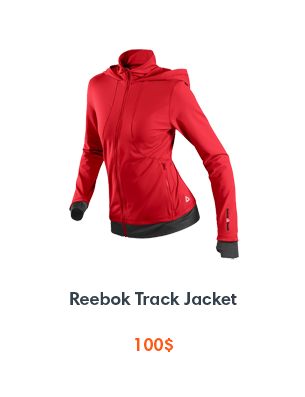
<style>
.page{position:relative;width:305px;height:397px;background:#ffffff}
.page>*{position:absolute;margin:0}
.t1{font:18px "HarmoniaSansProCyr-Bold";color:#34404b}
.t2{font:18px "HarmoniaSansProCyr-Bold";color:#ff5912}
</style>
<div class="page">
<p class="t1" style="left:70px;top:292px;width:167px;height:13px">Reebok Track Jacket</p>
<p class="t2" style="left:135px;top:338px;width:38px;height:14px">$100</p>
</div>
